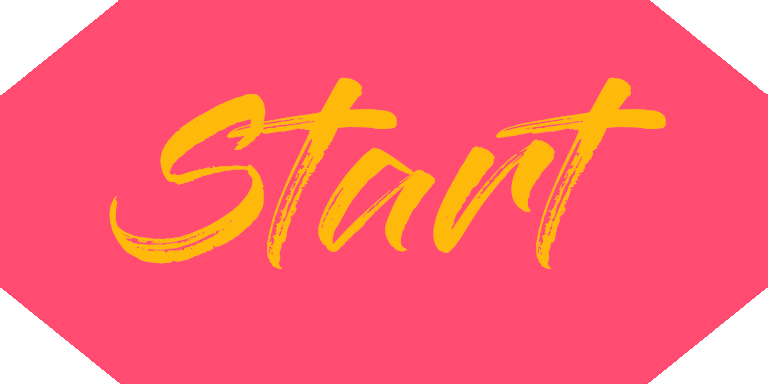
<style>
.page{position:relative;width:768px;height:384px;background:#ff4c70}
.page>*{position:absolute;margin:0}
.t1{font:150px "GlossAndBloom";color:#ffc000;scale:1.24 1}
</style>
<div class="page">
<p class="t1" style="left:109px;top:77px;width:557px;height:192px;opacity:0.9">Start</p>
</div>
